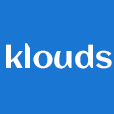
<style>
.page{position:relative;width:114px;height:114px;background:#1976d2}
.page>*{position:absolute;margin:0}
.t1{font:30px "Aclonica-Regular";color:#ffffff}
</style>
<div class="page">
<p class="t1" style="left:6px;top:43px;width:106px;height:26px">klouds</p>
</div>
